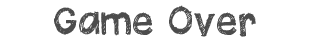
<style>
.page{position:relative;width:310px;height:49px;background:#ffffff}
.page>*{position:absolute;margin:0}
.t1{font:56px "QuickPencil-Regular";color:#4c4c4c}
</style>
<div class="page">
<p class="t1" style="left:54px;top:5px;width:202px;height:32px">Game Over</p>
</div>
